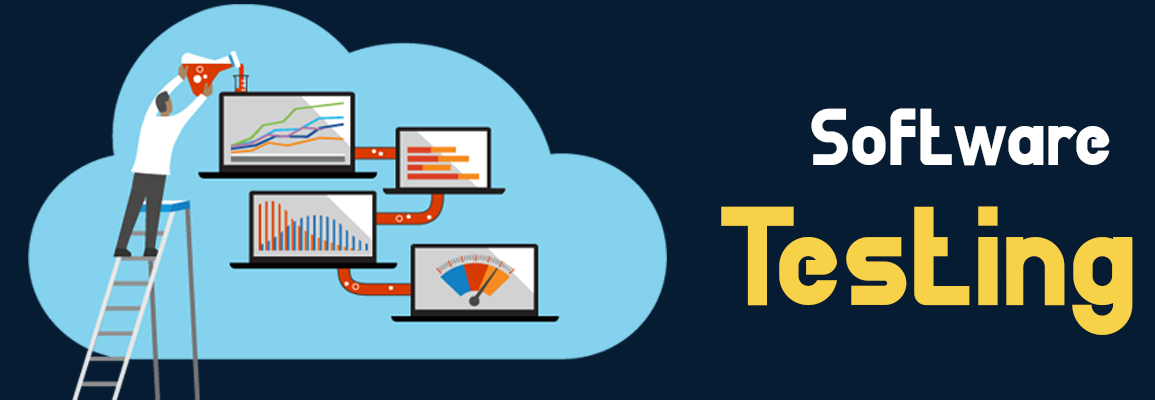
<style>
.page{position:relative;width:1155px;height:400px;background:#061c33}
.page>*{position:absolute;margin:0}
.t1{font:73.5px "BigBOBYRegular";color:#ffffff}
.t2{font:128.2px "BigBOBYRegular";color:#f7d147}
</style>
<div class="page">
<p class="t1" style="left:811px;top:108px;width:299px;height:58px">Software</p>
<p class="t2" style="left:721px;top:206px;width:412px;height:129px">Testing</p>
</div>
